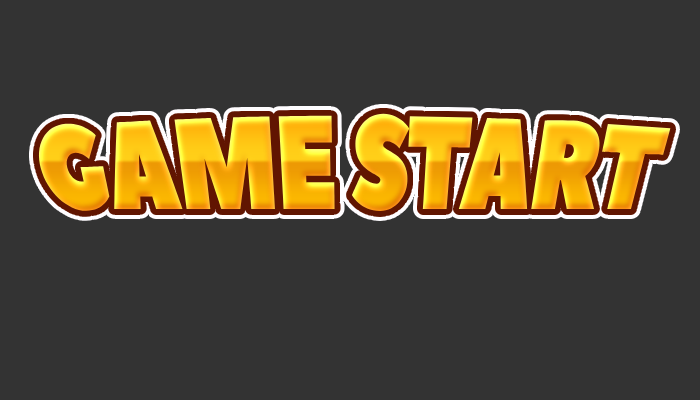
<style>
.page{position:relative;width:700px;height:400px;background:#333333}
.page>*{position:absolute;margin:0}
.t1{font:115px "PeaceSans";letter-spacing:-0.025em;scale:0.83 1}
</style>
<div class="page">
<p class="t1" style="left:38px;top:113px;width:633px;height:98px">GAME START</p>
</div>
